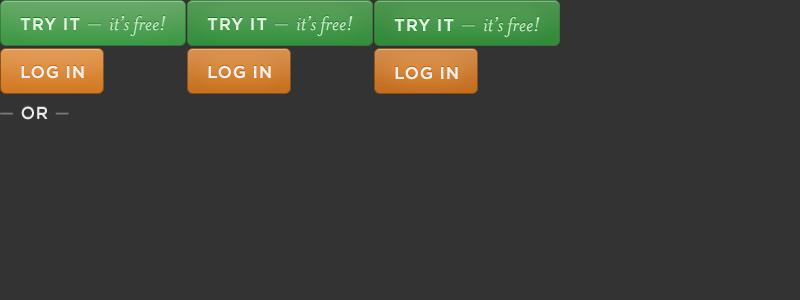
<style>
.page{position:relative;width:800px;height:300px;background:#333333}
.page>*{position:absolute;margin:0}
.t1{font:23px "MrsEavesSmartLigItalic";color:#c0e6c2}
.t2{font:17px "GothamHTF-Bold";letter-spacing:0.04em;color:#e0f3e1}
.t3{font:17px "GothamHTF-Light";letter-spacing:0.04em;color:#e0f3e1}
.t4{font:17px "GothamHTF-Bold";letter-spacing:0.04em;color:#f6eee7}
.t5{font:17px "GothamHTF-Medium";letter-spacing:0.04em;color:#ececec}
.t6{font:17px "GothamHTF-Light";letter-spacing:0.04em;color:#b8b8b8}
</style>
<div class="page">
<p class="t1" style="left:110px;top:15px;width:56px;height:22px">it’s free!</p>
<p class="t1" style="left:297px;top:15px;width:56px;height:22px">it’s free!</p>
<p class="t1" style="left:484px;top:16px;width:56px;height:22px">it’s free!</p>
<p class="t2" style="left:20px;top:18px;width:81px;height:12px">TRY IT <span class="t3">—</span></p>
<p class="t2" style="left:207px;top:18px;width:81px;height:12px">TRY IT <span class="t3">—</span></p>
<p class="t2" style="left:394px;top:19px;width:81px;height:12px">TRY IT <span class="t3">—</span></p>
<p class="t4" style="left:21px;top:65px;width:63px;height:14px">LOG IN</p>
<p class="t4" style="left:208px;top:65px;width:63px;height:14px">LOG IN</p>
<p class="t4" style="left:395px;top:66px;width:63px;height:14px">LOG IN</p>
<p class="t5" style="left:0px;top:106px;width:69px;height:14px"><span class="t6">— </span>OR <span class="t6">—</span></p>
</div>
